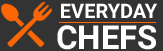
<style>
.page{position:relative;width:163px;height:51px;background:#333333}
.page>*{position:absolute;margin:0}
.t1{font:20px "Roboto-Bold";color:#ffffff}
.t2{font:33px "Roboto-Bold";color:#ffffff}
</style>
<div class="page">
<p class="t1" style="left:61px;top:3px;width:96px;height:15px">EVERYDAY</p>
<p class="t2" style="left:57px;top:25px;width:99px;height:25px">CHEFS</p>
</div>
